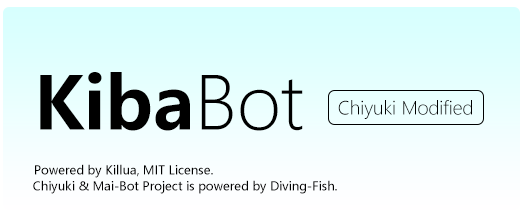
<style>
.page{position:relative;width:524px;height:218px}
.page>*{position:absolute;margin:0}
.t1{font:72px "MicrosoftYaHei-Bold";color:#000000}
.t2{font:72px "MicrosoftYaHeiLight";color:#000000}
.t3{font:18px "MicrosoftYaHeiLight";color:#000000}
.t4{font:12px "MicrosoftYaHei";color:#000000}
</style>
<div class="page">
<p class="t1" style="left:40px;top:72px;width:263px;height:59px">Kiba<span class="t2">Bot</span></p>
<p class="t3" style="left:338px;top:100px;width:134px;height:19px">Chiyuki Modified</p>
<p class="t4" style="left:35px;top:164px;width:178px;height:14px">Powered by Killua, MIT License.</p>
<p class="t4" style="left:33px;top:180px;width:304px;height:14px">Chiyuki &amp; Mai-Bot Project is powered by Diving-Fish.</p>
</div>
